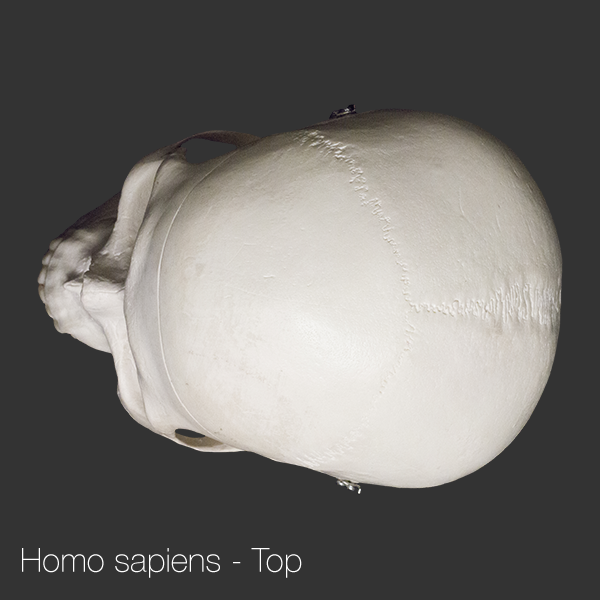
<style>
.page{position:relative;width:600px;height:600px;background:#333333}
.page>*{position:absolute;margin:0}
.t1{font:33.3px "HelveticaNeue-Thin";color:#ffffff}
</style>
<div class="page">
<p class="t1" style="left:22px;top:548px;width:280px;height:30px">Homo sapiens - Top</p>
</div>
